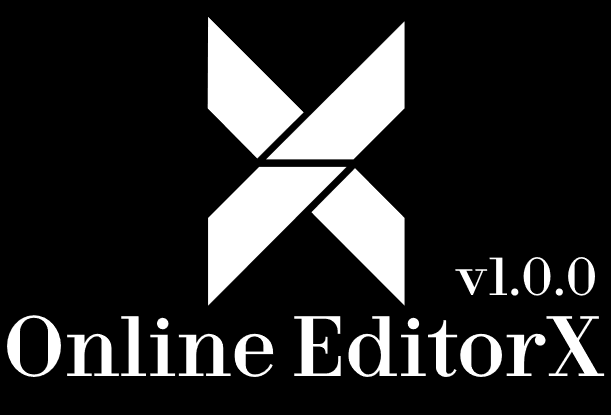
<style>
.page{position:relative;width:611px;height:415px;background:#000000}
.page>*{position:absolute;margin:0}
.t1{font:50px "FinSerifDisplay-Regular";color:#ffffff}
.t2{font:80px "FinSerifDisplay-Regular";color:#ffffff}
</style>
<div class="page">
<p class="t1" style="left:455px;top:257px;width:140px;height:39px">v1.0.0</p>
<p class="t2" style="left:7px;top:315px;width:598px;height:62px">Online EditorX</p>
</div>
